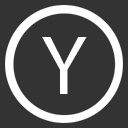
<style>
.page{position:relative;width:128px;height:128px;background:#333333}
.page>*{position:absolute;margin:0}
.t1{font:84.2px "MyriadPro-Regular";color:#ffffff}
</style>
<div class="page">
<p class="t1" style="left:42px;top:37px;width:45px;height:57px">Y</p>
</div>
